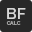
<style>
.page{position:relative;width:32px;height:32px;background:#282828}
.page>*{position:absolute;margin:0}
.t1{font:15.6px "Raleway-SemiBold";letter-spacing:-0.01em;color:#d7d7d7;text-transform:uppercase}
.t2{font:5.4px "Raleway-SemiBold";letter-spacing:-0.01em;color:#9e9e9e;text-transform:uppercase}
</style>
<div class="page">
<p class="t1" style="left:7px;top:8px;width:19px;height:11px">BF</p>
<p class="t2" style="left:6px;top:21px;width:15px;height:4px">calc</p>
</div>
